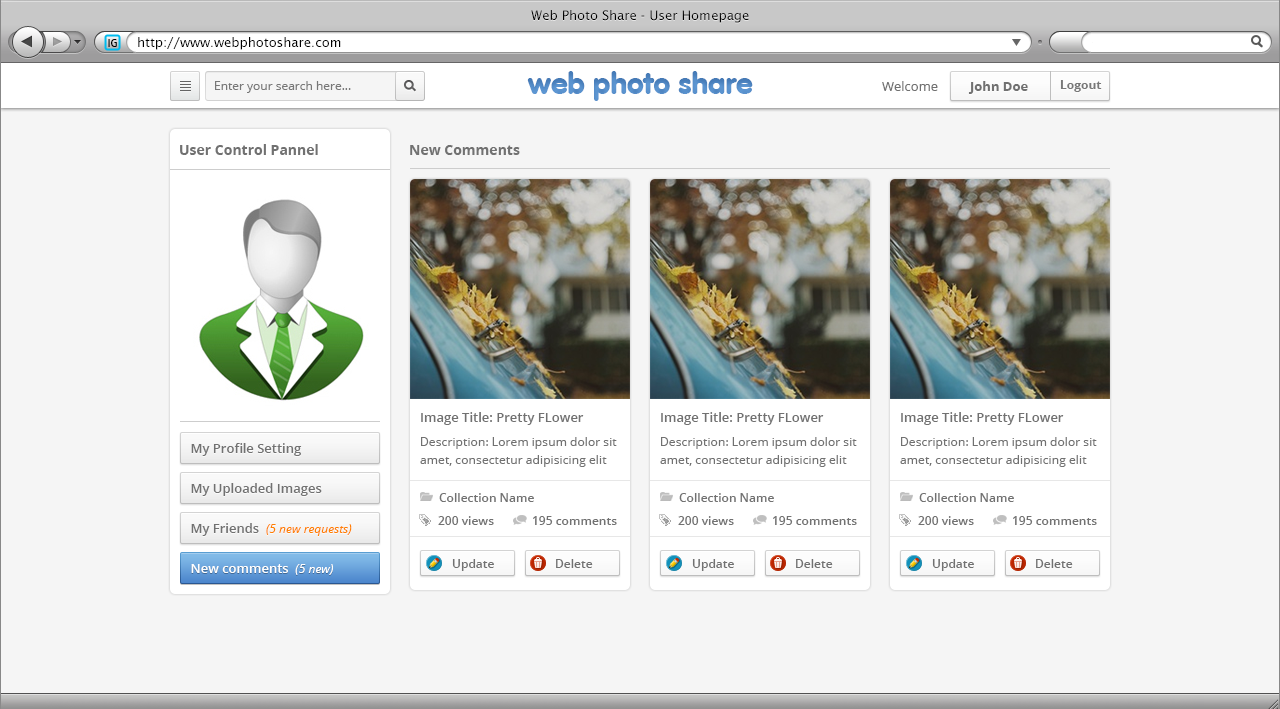
<style>
.page{position:relative;width:1280px;height:709px;background:#f5f5f5}
.page>*{position:absolute;margin:0}
.t1{font:13px "LucidaSans";color:#000000}
.t2{font:12px "Dax-Regular";color:#000000}
.t3{font:30px "VAGRounded-Black";color:#619bd7}
.t4{font:12px "OpenSans";color:#787878}
.t5{font:13px "OpenSans";color:#717171}
.t6{font:13px "OpenSans-Bold";color:#717171}
.t7{font:12px "OpenSans-Bold";color:#787878}
.t8{font:14px "OpenSans-Bold";color:#717171}
.t9{font:13px "OpenSans-Semibold";color:#717171}
.t10{font:12px/18px "OpenSans";color:#717171}
.t11{font:12px "OpenSans-Semibold";color:#717171}
.t12{font:12px "OpenSans-Italic";color:#ff8100}
.t13{font:13px "OpenSans-Semibold";color:#ffffff}
.t14{font:12px "OpenSans-Italic";color:#ffffff}
</style>
<div class="page">
<p class="t1" style="left:531px;top:10px;width:218px;height:13px">Web Photo Share - User Homepage</p>
<p class="t2" style="left:108px;top:39px;width:9px;height:8px">IG</p>
<p class="t1" style="left:138px;top:37px;width:203px;height:13px">http://www.webphotoshare.com</p>
<p class="t3" style="left:527px;top:71px;width:226px;height:30px">web photo share</p>
<p class="t4" style="left:215px;top:81px;width:136px;height:12px">Enter your search here...</p>
<p class="t5" style="left:882px;top:81px;width:56px;height:10px">Welcome</p>
<p class="t6" style="left:968px;top:81px;width:60px;height:13px">John Doe</p>
<p class="t7" style="left:1060px;top:80px;width:42px;height:12px">Logout</p>
<p class="t8" style="left:180px;top:144px;width:138px;height:11px">User Control Pannel</p>
<p class="t8" style="left:410px;top:145px;width:110px;height:10px">New Comments</p>
<p class="t9" style="left:421px;top:412px;width:163px;height:13px">Image Title: Pretty FLower</p>
<p class="t9" style="left:661px;top:412px;width:163px;height:13px">Image Title: Pretty FLower</p>
<p class="t9" style="left:901px;top:412px;width:163px;height:13px">Image Title: Pretty FLower</p>
<p class="t10" style="left:420px;top:437px;width:197px;height:30px">Description: Lorem ipsum dolor sit amet, consectetur adipisicing elit</p>
<p class="t10" style="left:660px;top:437px;width:197px;height:30px">Description: Lorem ipsum dolor sit amet, consectetur adipisicing elit</p>
<p class="t10" style="left:900px;top:437px;width:197px;height:30px">Description: Lorem ipsum dolor sit amet, consectetur adipisicing elit</p>
<p class="t9" style="left:191px;top:443px;width:111px;height:13px">My Profile Setting</p>
<p class="t9" style="left:191px;top:483px;width:131px;height:13px">My Uploaded Images</p>
<p class="t11" style="left:439px;top:493px;width:95px;height:9px">Collection Name</p>
<p class="t11" style="left:679px;top:493px;width:95px;height:9px">Collection Name</p>
<p class="t11" style="left:919px;top:493px;width:95px;height:9px">Collection Name</p>
<p class="t11" style="left:438px;top:516px;width:56px;height:9px">200 views</p>
<p class="t11" style="left:533px;top:516px;width:84px;height:9px">195 comments</p>
<p class="t11" style="left:678px;top:516px;width:56px;height:9px">200 views</p>
<p class="t11" style="left:773px;top:516px;width:84px;height:9px">195 comments</p>
<p class="t11" style="left:918px;top:516px;width:56px;height:9px">200 views</p>
<p class="t11" style="left:1013px;top:516px;width:84px;height:9px">195 comments</p>
<p class="t12" style="left:191px;top:523px;width:161px;height:13px"><span class="t9">My Friends  </span>(5 new requests)</p>
<p class="t13" style="left:191px;top:564px;width:142px;height:11px">New comments  <span class="t14">(5 new)</span></p>
<p class="t11" style="left:452px;top:559px;width:42px;height:12px">Update</p>
<p class="t11" style="left:556px;top:559px;width:37px;height:9px">Delete</p>
<p class="t11" style="left:692px;top:559px;width:42px;height:12px">Update</p>
<p class="t11" style="left:796px;top:559px;width:37px;height:9px">Delete</p>
<p class="t11" style="left:932px;top:559px;width:42px;height:12px">Update</p>
<p class="t11" style="left:1036px;top:559px;width:37px;height:9px">Delete</p>
</div>
